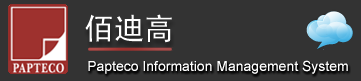
<style>
.page{position:relative;width:361px;height:81px;background:#333333}
.page>*{position:absolute;margin:0}
.t1{font:30px "SimHei";color:#ffffff}
.t2{font:14px "ArialMT";color:#ffffff}
</style>
<div class="page">
<p class="t1" style="left:85px;top:14px;width:87px;height:29px">佰迪高</p>
<p class="t2" style="left:88px;top:60px;width:260px;height:14px">Papteco Information Management System</p>
</div>
